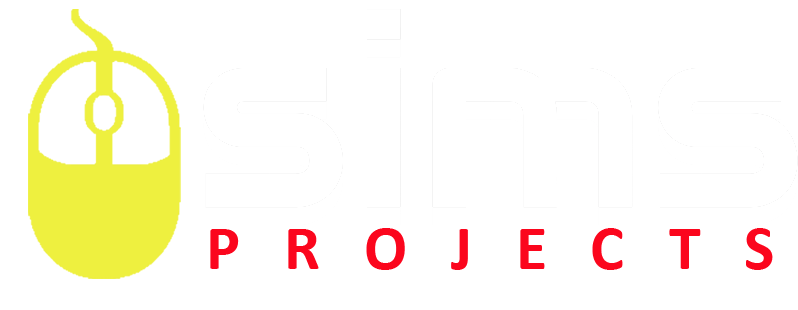
<style>
.page{position:relative;width:798px;height:310px;background:#ffffff}
.page>*{position:absolute;margin:0}
.t1{font:64px "Calibri-Bold";letter-spacing:0.69em;color:#fb061d}
</style>
<div class="page">
<p class="t1" style="left:210px;top:228px;width:563px;height:42px">PROJECTS</p>
</div>
